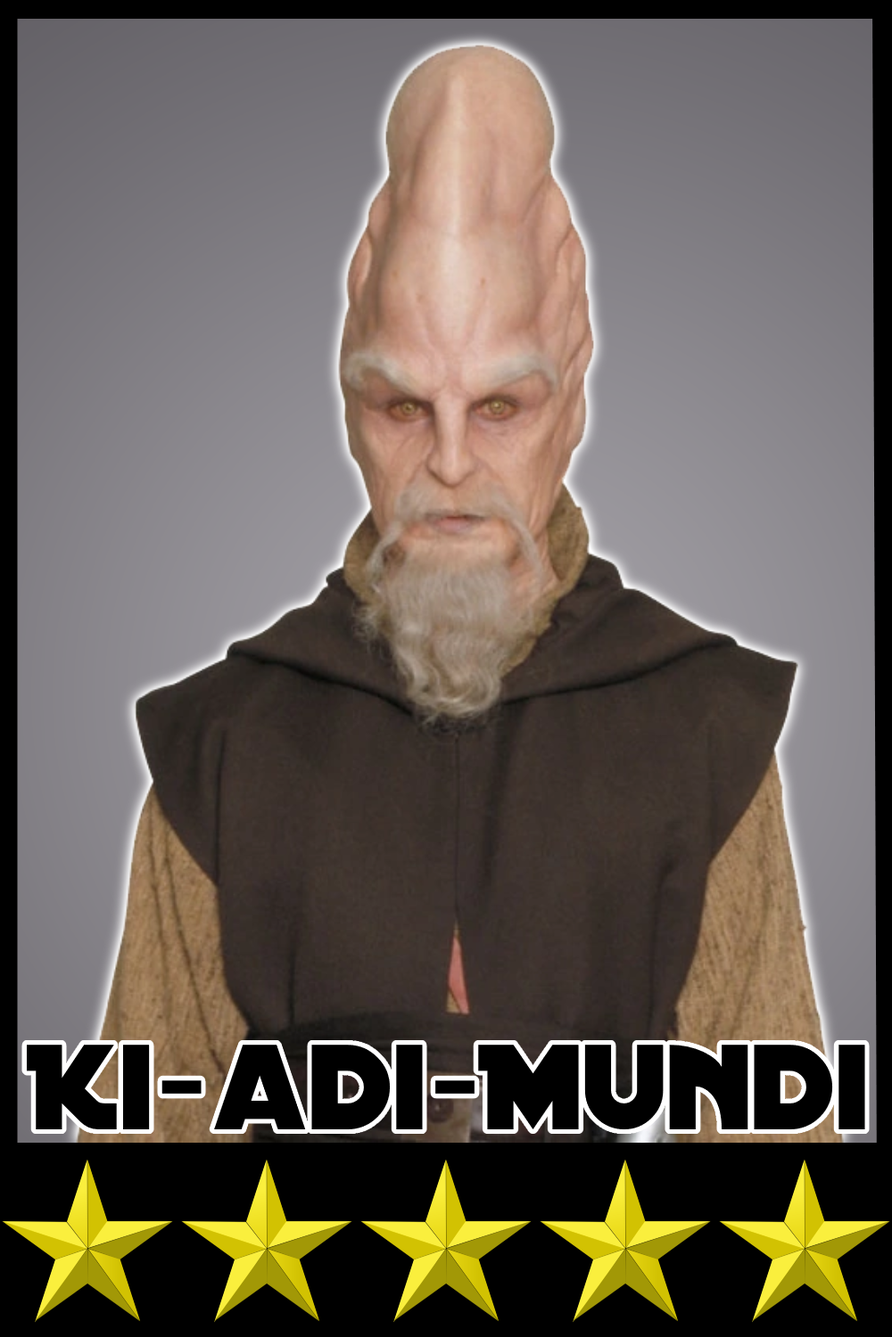
<style>
.page{position:relative;width:892px;height:1337px}
.page>*{position:absolute;margin:0}
.t1{font:130.1px "DistantGalaxy";color:#000000}
</style>
<div class="page">
<p class="t1" style="left:26px;top:1045px;width:839px;height:85px">Ki-adi-Mundi</p>
</div>
